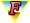
<style>
.page{position:relative;width:30px;height:23px;background:#ffffff}
.page>*{position:absolute;margin:0}
.t1{font:16px "DejaVuSerifCondensed-Italic";letter-spacing:0.1em;font-weight:bold}
</style>
<div class="page">
<p class="t1" style="left:9px;top:2px;width:12px;height:13px">F</p>
</div>
